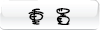
<style>
.page{position:relative;width:100px;height:30px}
.page>*{position:absolute;margin:0}
.t1{font:18px "JWaWAZuan";color:#000000}
</style>
<div class="page">
<p class="t1" style="left:28px;top:8px;width:42px;height:17px">重 置</p>
</div>
